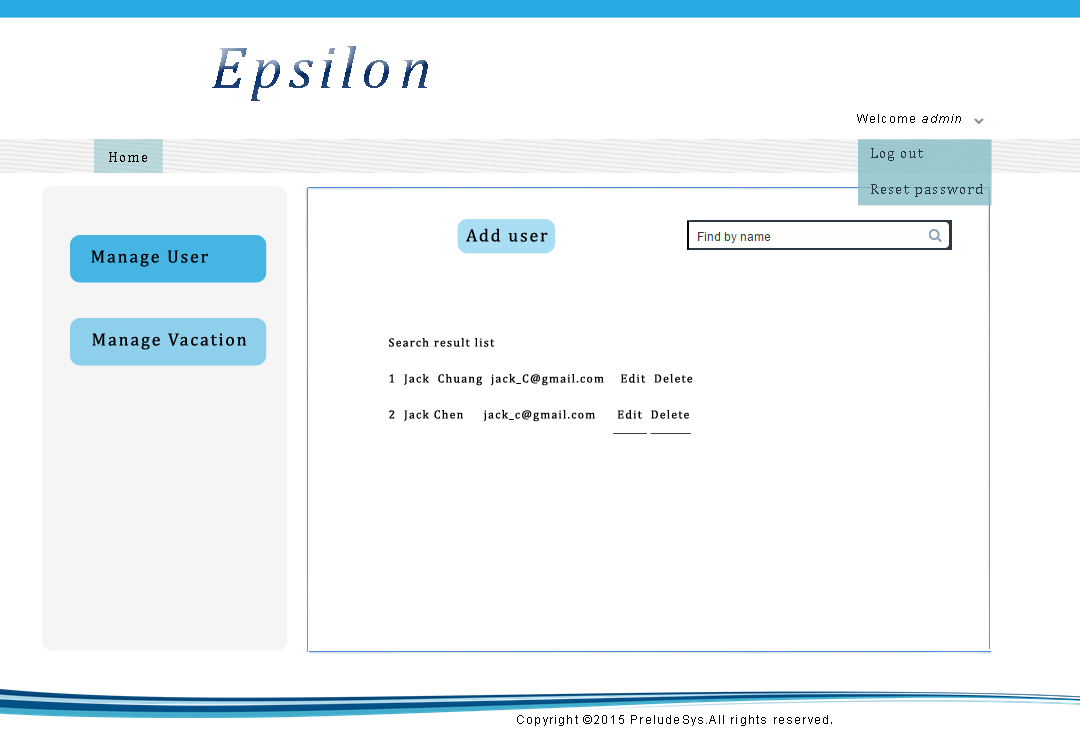
<style>
.page{position:relative;width:1080px;height:750px;background:#ffffff}
.page>*{position:absolute;margin:0}
.t1{font:60px "Cambria-Italic";letter-spacing:0.1em}
.t2{font:12px "ArialMT";letter-spacing:0.1em;color:#010101}
.t3{font:12px "Arial-ItalicMT";letter-spacing:0.1em;color:#010101}
.t4{font:14px/36px "Cambria";letter-spacing:0.1em;color:#2a3744}
.t5{font:14px "Cambria";letter-spacing:0.1em;color:#000000}
.t6{font:18px "Cambria";letter-spacing:0.1em;color:#050505}
.t7{font:18px "Cambria";letter-spacing:0.1em;color:#000000}
.t8{font:12px/36px "Cambria";letter-spacing:0.1em;color:#000000}
.t9{font:12px/36px "Cambria";letter-spacing:0.1em;color:#000000;text-decoration:underline}
.t10{font:12px "Cambria";letter-spacing:0.1em;color:#000000;text-decoration:underline}
.t11{font:12px "ArialMT";letter-spacing:0.1em;color:#000000}
</style>
<div class="page">
<p class="t1" style="left:212px;top:46px;width:216px;height:55px">Epsilon</p>
<p class="t2" style="left:857px;top:114px;width:121px;height:9px">Welcome <span class="t3">admin</span>  V</p>
<p class="t4" style="left:871px;top:148px;width:112px;height:49px">Log out<br>Reset password</p>
<p class="t5" style="left:109px;top:152px;width:38px;height:10px">Home</p>
<p class="t6" style="left:466px;top:228px;width:82px;height:14px">Add user</p>
<p class="t7" style="left:91px;top:250px;width:117px;height:17px">Manage User</p>
<p class="t7" style="left:92px;top:333px;width:155px;height:17px">Manage Vacation</p>
<p class="t8" style="left:389px;top:338px;width:304px;height:96px">Search result list<br>1  Jack  Chuang  jack_C@gmail.com    Edit  Delete<br>2  Jack Chen     jack_c@gmail.com   <span class="t9"> Edit  </span><span class="t10">Delete</span></p>
<p class="t11" style="left:517px;top:715px;width:315px;height:11px">Copyright ©2015 PreludeSys.All rights reserved<span class="t5">.</span></p>
</div>
